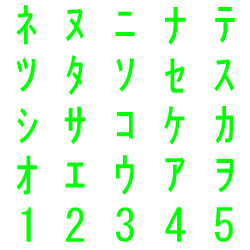
<style>
.page{position:relative;width:250px;height:250px;background:#ffffff}
.page>*{position:absolute;margin:0}
.t1{font:45px "MS-Gothic";color:#00ff00}
</style>
<div class="page">
<p class="t1" style="left:16px;top:5px;width:21px;height:40px">ﾈ</p>
<p class="t1" style="left:65px;top:9px;width:19px;height:33px">ﾇ</p>
<p class="t1" style="left:115px;top:11px;width:20px;height:25px">ﾆ</p>
<p class="t1" style="left:165px;top:7px;width:21px;height:38px">ﾅ</p>
<p class="t1" style="left:215px;top:7px;width:20px;height:36px">ﾃ</p>
<p class="t1" style="left:16px;top:57px;width:20px;height:35px">ﾂ</p>
<p class="t1" style="left:66px;top:55px;width:17px;height:40px">ﾀ</p>
<p class="t1" style="left:116px;top:58px;width:19px;height:34px">ｿ</p>
<p class="t1" style="left:165px;top:58px;width:20px;height:35px">ｾ</p>
<p class="t1" style="left:214px;top:59px;width:20px;height:33px">ｽ</p>
<p class="t1" style="left:17px;top:108px;width:21px;height:36px">ｼ</p>
<p class="t1" style="left:64px;top:106px;width:22px;height:38px">ｻ</p>
<p class="t1" style="left:117px;top:112px;width:16px;height:27px">ｺ</p>
<p class="t1" style="left:164px;top:106px;width:21px;height:39px">ｹ</p>
<p class="t1" style="left:215px;top:106px;width:19px;height:38px">ｶ</p>
<p class="t1" style="left:16px;top:155px;width:22px;height:40px">ｵ</p>
<p class="t1" style="left:116px;top:155px;width:18px;height:40px">ｳ</p>
<p class="t1" style="left:165px;top:157px;width:20px;height:35px">ｱ</p>
<p class="t1" style="left:216px;top:158px;width:18px;height:35px">ｦ</p>
<p class="t1" style="left:65px;top:162px;width:20px;height:26px">ｴ</p>
<p class="t1" style="left:21px;top:207px;width:10px;height:35px">1</p>
<p class="t1" style="left:66px;top:207px;width:18px;height:35px">2</p>
<p class="t1" style="left:116px;top:207px;width:18px;height:35px">3</p>
<p class="t1" style="left:165px;top:207px;width:20px;height:35px">4</p>
<p class="t1" style="left:215px;top:207px;width:18px;height:35px">5</p>
</div>
